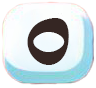
<style>
.page{position:relative;width:96px;height:88px}
.page>*{position:absolute;margin:0}
.t1{font:59.4px "Ravie";color:#352623}
</style>
<div class="page">
<p class="t1" style="left:27px;top:18px;width:42px;height:47px">0</p>
</div>
